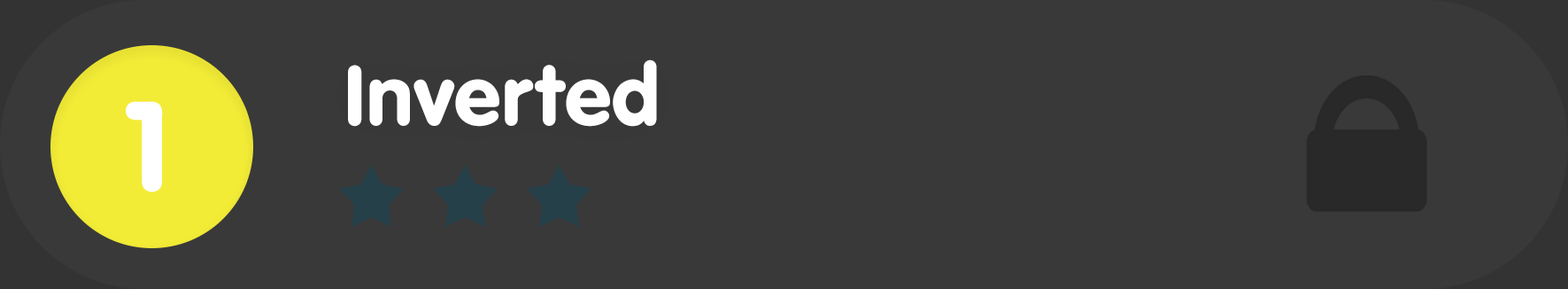
<style>
.page{position:relative;width:1568px;height:289px;background:#393939}
.page>*{position:absolute;margin:0}
.t1{font:88.5px "VAGRundschriftD";color:#ffffff}
.t2{font:132.8px "VAGRundschriftD";color:#ffffff}
</style>
<div class="page">
<p class="t1" style="left:348px;top:59px;width:309px;height:68px">Inverted</p>
<p class="t2" style="left:126px;top:101px;width:37px;height:91px">1</p>
</div>
